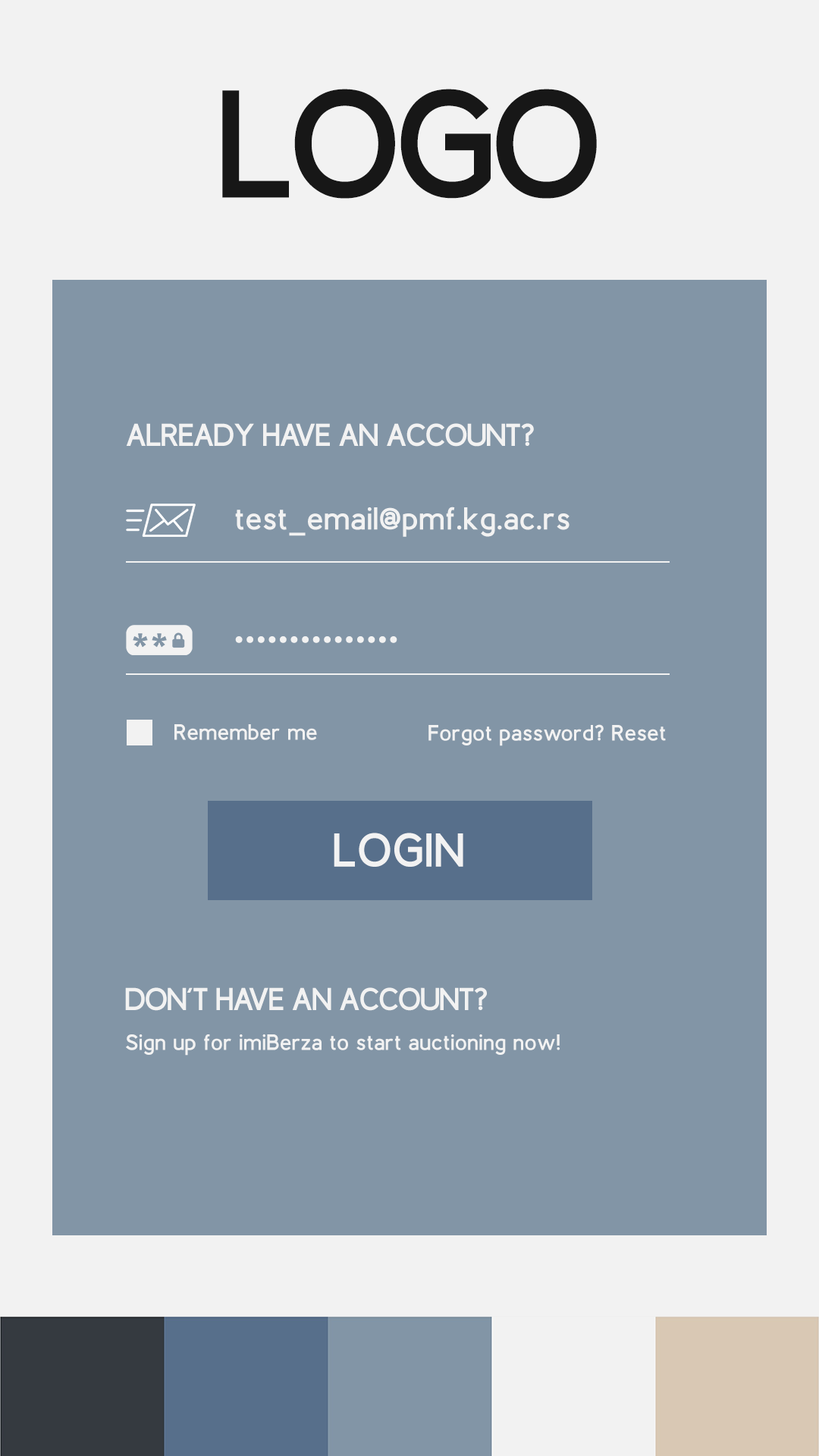
<style>
.page{position:relative;width:819px;height:1456px;background:#8295a6}
.page>*{position:absolute;margin:0}
.t1{font:152.7px "BerlinBold";color:#171717}
.t2{font:31.6px "BerlinBold";color:#f2f2f2}
.t3{font:31.6px "BerlinBold";letter-spacing:0.05em;color:#f2f2f2}
.t4{font:31.6px "BerlinBold";letter-spacing:0.1em;color:#f2f2f2}
.t5{font:22.1px "BerlinBold";letter-spacing:0.05em;color:#f2f2f2}
.t6{font:47.4px "BerlinBold";letter-spacing:0.05em;color:#f2f2f2}
</style>
<div class="page">
<p class="t1" style="left:222px;top:89px;width:375px;height:110px">LOGO</p>
<p class="t2" style="left:126px;top:423px;width:408px;height:24px">ALREADY HAVE AN ACCOUNT?</p>
<p class="t3" style="left:235px;top:507px;width:335px;height:30px">test_email@pmf.kg.ac.rs</p>
<p class="t4" style="left:235px;top:636px;width:162px;height:7px">•••••••••••••••</p>
<p class="t5" style="left:174px;top:724px;width:143px;height:16px">Remember me</p>
<p class="t5" style="left:428px;top:724px;width:238px;height:22px">Forgot password? Reset</p>
<p class="t6" style="left:334px;top:833px;width:129px;height:34px">LOGIN</p>
<p class="t2" style="left:125px;top:987px;width:362px;height:24px">DON’T HAVE AN ACCOUNT?</p>
<p class="t5" style="left:126px;top:1034px;width:434px;height:22px">Sign up for imiBerza to start auctioning now!</p>
</div>
